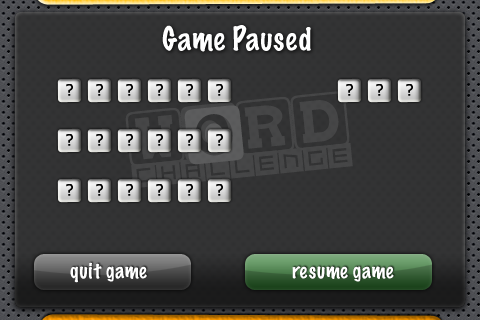
<style>
.page{position:relative;width:480px;height:320px}
.page>*{position:absolute;margin:0}
.t1{font:30px "MarkerFelt-Thin";color:#ffffff}
.t2{font:15.8px "Verdana";color:#000000}
.t3{font:20px "MarkerFelt-Thin";color:#ffffff}
</style>
<div class="page">
<p class="t1" style="left:162px;top:25px;width:149px;height:27px">Game Paused</p>
<p class="t2" style="left:66px;top:84px;width:7px;height:12px;rotate:-1deg">?</p>
<p class="t2" style="left:96px;top:84px;width:7px;height:12px;rotate:-1deg">?</p>
<p class="t2" style="left:126px;top:84px;width:7px;height:12px;rotate:-1deg">?</p>
<p class="t2" style="left:156px;top:84px;width:7px;height:12px;rotate:-1deg">?</p>
<p class="t2" style="left:186px;top:84px;width:7px;height:12px;rotate:-1deg">?</p>
<p class="t2" style="left:216px;top:84px;width:7px;height:12px;rotate:-1deg">?</p>
<p class="t2" style="left:346px;top:84px;width:7px;height:12px;rotate:-1deg">?</p>
<p class="t2" style="left:376px;top:84px;width:7px;height:12px;rotate:-1deg">?</p>
<p class="t2" style="left:406px;top:84px;width:7px;height:12px;rotate:-1deg">?</p>
<p class="t2" style="left:66px;top:134px;width:7px;height:12px;rotate:-1deg">?</p>
<p class="t2" style="left:96px;top:134px;width:7px;height:12px;rotate:-1deg">?</p>
<p class="t2" style="left:126px;top:134px;width:7px;height:12px;rotate:-1deg">?</p>
<p class="t2" style="left:156px;top:134px;width:7px;height:12px;rotate:-1deg">?</p>
<p class="t2" style="left:186px;top:134px;width:7px;height:12px;rotate:-1deg">?</p>
<p class="t2" style="left:216px;top:134px;width:7px;height:12px;rotate:-1deg">?</p>
<p class="t2" style="left:66px;top:184px;width:7px;height:12px;rotate:-1deg">?</p>
<p class="t2" style="left:96px;top:184px;width:7px;height:12px;rotate:-1deg">?</p>
<p class="t2" style="left:126px;top:184px;width:7px;height:12px;rotate:-1deg">?</p>
<p class="t2" style="left:156px;top:184px;width:7px;height:12px;rotate:-1deg">?</p>
<p class="t2" style="left:186px;top:184px;width:7px;height:12px;rotate:-1deg">?</p>
<p class="t2" style="left:216px;top:184px;width:7px;height:12px;rotate:-1deg">?</p>
<p class="t3" style="left:70px;top:262px;width:77px;height:21px">quit game</p>
<p class="t3" style="left:292px;top:266px;width:102px;height:16px">resume game</p>
</div>
